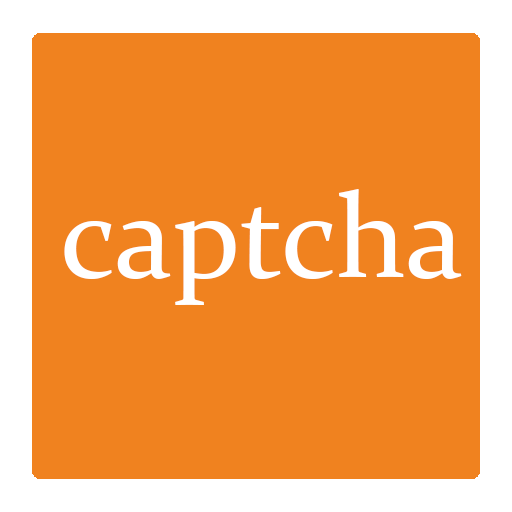
<style>
.page{position:relative;width:512px;height:512px;background:#f0821f}
.page>*{position:absolute;margin:0}
.t1{font:120px "Constantia";color:#ffffff}
</style>
<div class="page">
<p class="t1" style="left:64px;top:189px;width:398px;height:116px">captcha</p>
</div>
